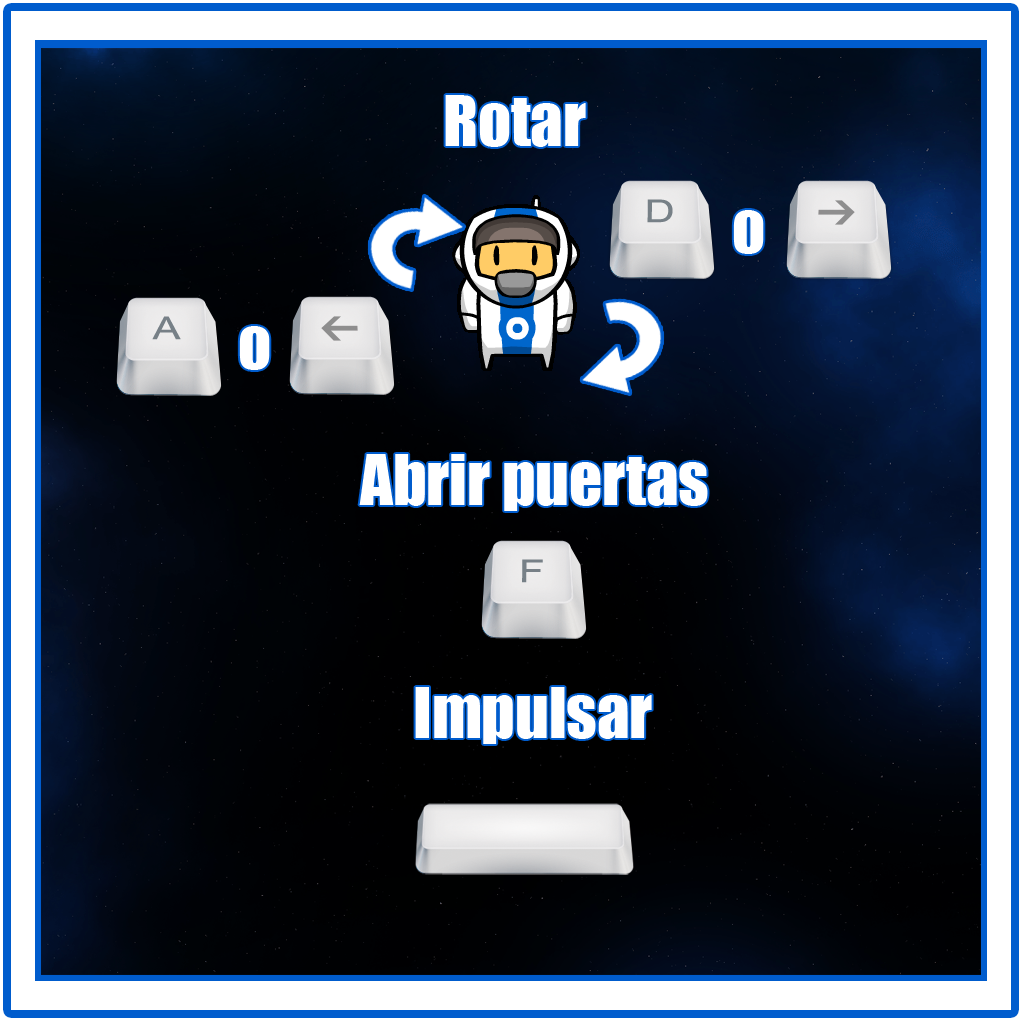
<style>
.page{position:relative;width:1024px;height:1024px}
.page>*{position:absolute;margin:0}
.t1{font:64.6px "Impact";color:#ffffff}
</style>
<div class="page">
<p class="t1" style="left:445px;top:95px;width:141px;height:52px">Rotar</p>
<p class="t1" style="left:733px;top:210px;width:31px;height:44px">o</p>
<p class="t1" style="left:239px;top:326px;width:31px;height:44px">o</p>
<p class="t1" style="left:359px;top:454px;width:349px;height:57px">Abrir puertas</p>
<p class="t1" style="left:415px;top:687px;width:237px;height:57px">Impulsar</p>
</div>
